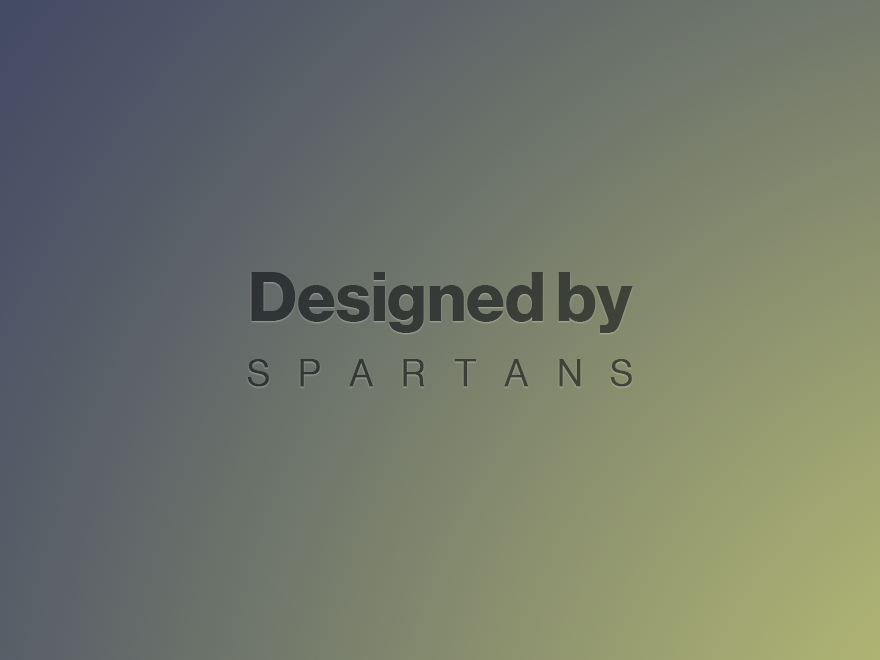
<style>
.page{position:relative;width:880px;height:660px}
.page>*{position:absolute;margin:0}
.t1{font:69.1px "NHaasGroteskDSPro-75Bd";color:#373a36}
.t2{font:37.2px/65px "NHaasGroteskDSPro-45Lt";letter-spacing:0.75em;color:#373a36;text-transform:uppercase;font-weight:bold}
</style>
<div class="page">
<p class="t1" style="left:247px;top:272px;width:386px;height:115px;text-align:center">Designed by<br><span class="t2">Spartans</span></p>
</div>
